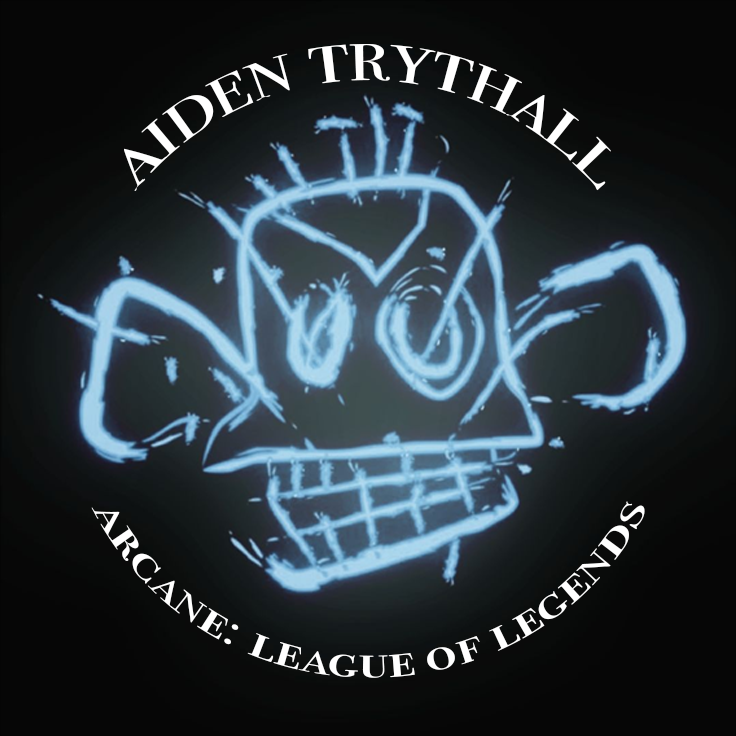
<style>
.page{position:relative;width:736px;height:736px}
.page>*{position:absolute;margin:0}
.t1{font:75px "BodoniSvtyTwoSCITCTT-Book";color:#ffffff}
.t2{font:48px "BodoniSvtyTwoSCITCTT-Book";color:#ffffff}
</style>
<div class="page">
<p class="t1" style="left:124px;top:44px;width:487px;height:147px">aiden trythall</p>
<p class="t2" style="left:91px;top:501px;width:554px;height:177px">arcane: league of legends</p>
</div>
